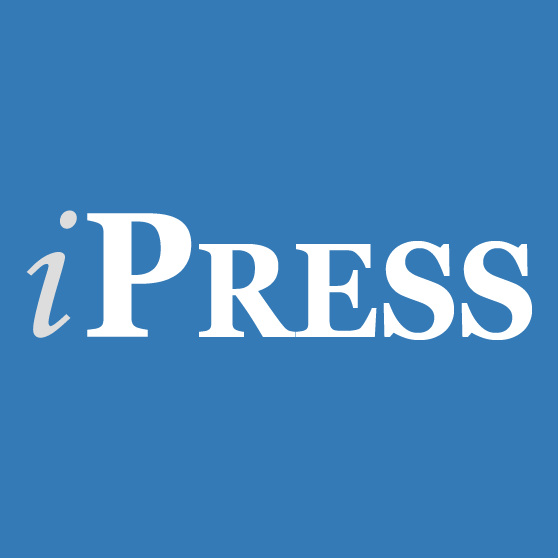
<style>
.page{position:relative;width:558px;height:558px;background:#337ab7}
.page>*{position:absolute;margin:0}
.t1{font:200px "MonotypeCorsiva";color:#dddddd}
.t2{font:178px "Georgia-Bold";color:#ffffff;scale:0.9 1}
.t3{font:134px "Georgia-Bold";letter-spacing:0.005em;color:#ffffff;scale:0.9 1}
</style>
<div class="page">
<p class="t1" style="left:26px;top:210px;width:51px;height:128px">i</p>
<p class="t2" style="left:87px;top:213px;width:105px;height:124px">P</p>
<p class="t3" style="left:199px;top:241px;width:333px;height:99px">RESS</p>
</div>
